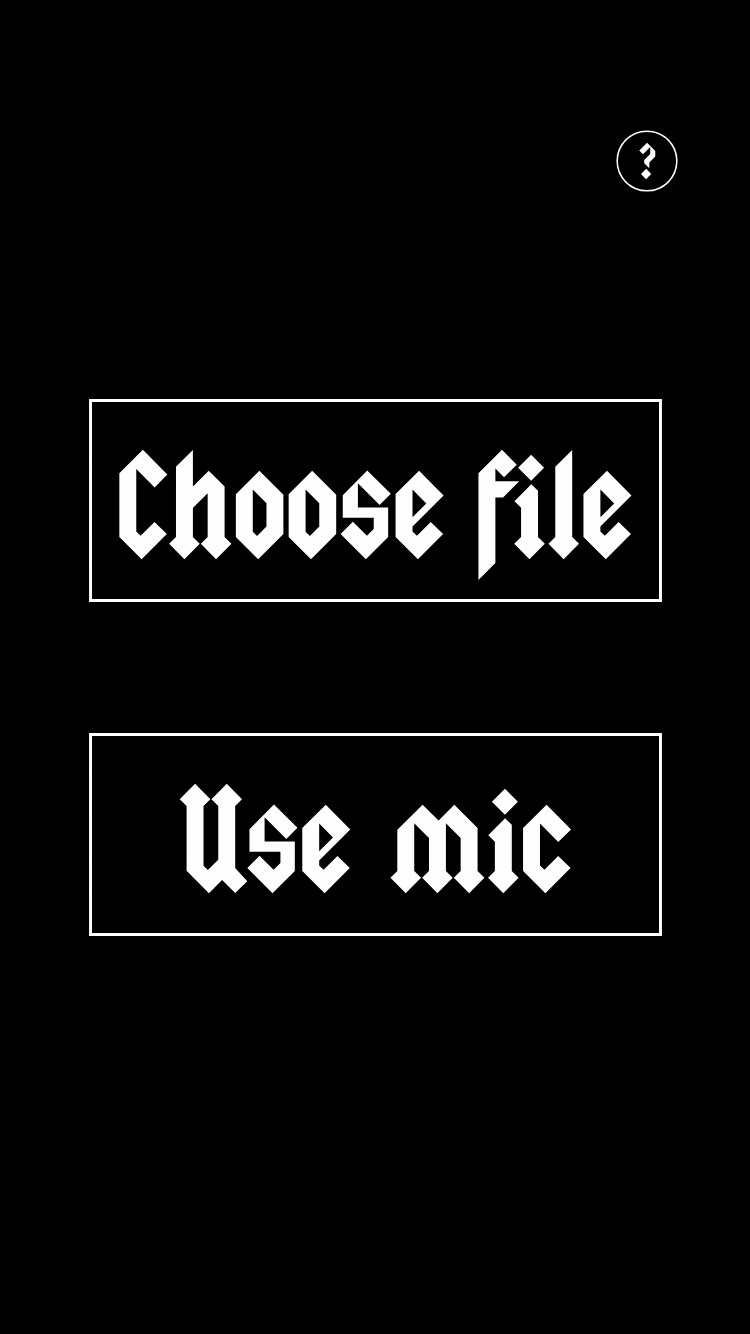
<style>
.page{position:relative;width:750px;height:1334px;background:#000000}
.page>*{position:absolute;margin:0}
.t1{font:40px "Squealer";color:#fffefe}
.t2{font:120px "Squealer";color:#fffefe}
</style>
<div class="page">
<p class="t1" style="left:639px;top:142px;width:17px;height:38px">?</p>
<p class="t2" style="left:119px;top:449px;width:513px;height:131px">Choose file</p>
<p class="t2" style="left:179px;top:783px;width:393px;height:111px">Use mic</p>
</div>
